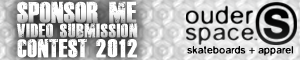
<style>
.page{position:relative;width:300px;height:60px}
.page>*{position:absolute;margin:0}
.t1{font:20.8px "DeadKansas";color:#ffffff}
.t2{font:13.9px "DeadKansas";letter-spacing:-0.005em;color:#ffffff}
.t3{font:17.9px "DeadKansas";letter-spacing:-0.005em;color:#ffffff}
.t4{font:17.9px "DeadKansas";letter-spacing:0.075em;color:#ffffff}
.t5{font:10.2px "Gaussian-Blur-Regular";letter-spacing:-0.025em;color:#000000}
.t6{font:10.2px "MyriadPro-Regular";letter-spacing:-0.025em;color:#000000}
</style>
<div class="page">
<p class="t1" style="left:17px;top:1px;width:120px;height:22px">SPONSOR me</p>
<p class="t2" style="left:17px;top:23px;width:121px;height:15px">video submission</p>
<p class="t3" style="left:17px;top:39px;width:120px;height:19px">contest <span class="t4">2012</span></p>
<p class="t5" style="left:187px;top:46px;width:106px;height:10px">skateboards <span class="t6">+  </span>apparel</p>
</div>
